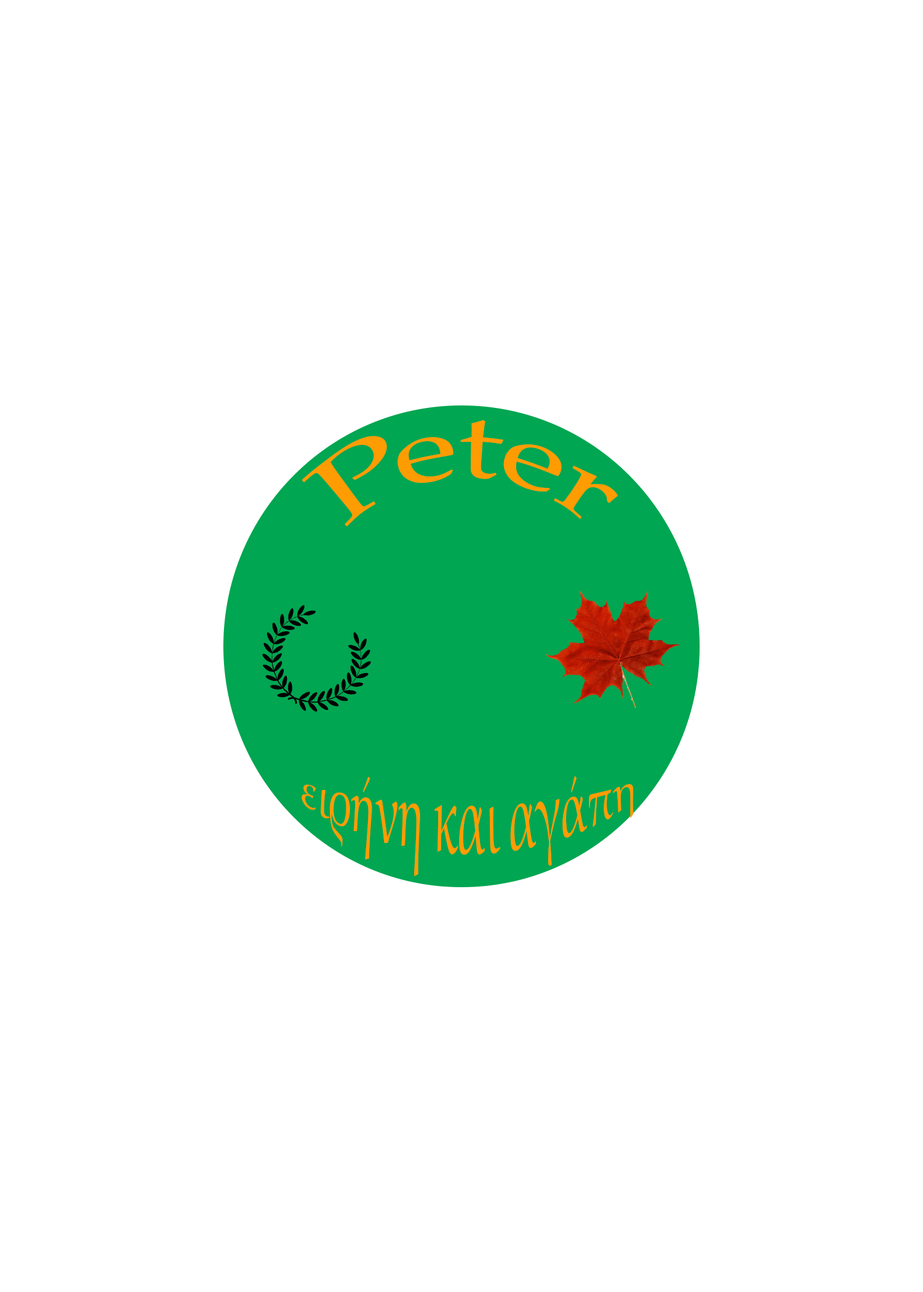
<style>
.page{position:relative;width:923px;height:1292px;background:#ffffff}
.page>*{position:absolute;margin:0}
.t1{font:92.3px "PalatinoLinotype-Roman";color:#ff9c01}
.t2{font:41px "PalatinoLinotype-Roman";color:#ff9c01}
</style>
<div class="page">
<p class="t1" style="left:301px;top:420px;width:317px;height:107px">Peter</p>
<p class="t2" style="left:301px;top:776px;width:333px;height:101px">ειρήνη και αγάπη</p>
</div>
